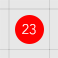
<style>
.page{position:relative;width:58px;height:58px;background:#e7e7e7}
.page>*{position:absolute;margin:0}
.t1{font:13.8px "Avenir-Light";color:#ffffff}
</style>
<div class="page">
<p class="t1" style="left:22px;top:24px;width:14px;height:11px">23</p>
</div>
